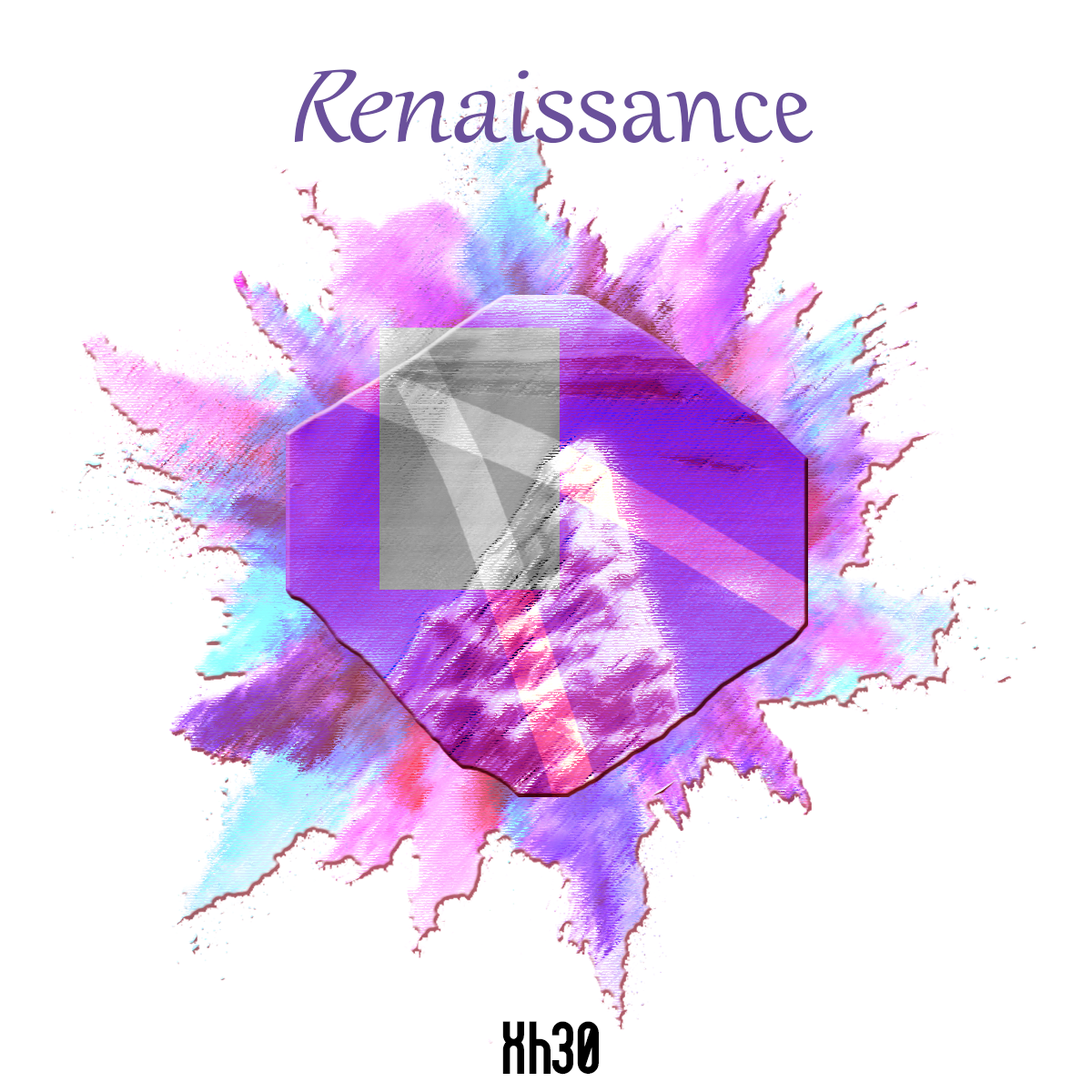
<style>
.page{position:relative;width:1092px;height:1092px;background:#ffffff}
.page>*{position:absolute;margin:0}
.t1{font:109.2px "Gabriola";color:#6a509b}
.t2{font:72.8px "Cirno";color:#000000}
</style>
<div class="page">
<p class="t1" style="left:294px;top:69px;width:520px;height:75px">Renaissance</p>
<p class="t2" style="left:502px;top:1021px;width:97px;height:54px">Xh30</p>
</div>
